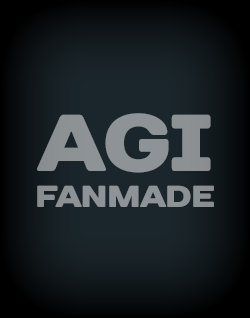
<style>
.page{position:relative;width:250px;height:318px}
.page>*{position:absolute;margin:0}
.t1{font:30.5px "DaysSansBlack";letter-spacing:-0.03em;color:#8d9395}
.t2{font:80.2px "DaysSansBlack";letter-spacing:-0.03em;color:#8d9395}
</style>
<div class="page">
<p class="t1" style="left:37px;top:113px;width:177px;height:94px;text-align:center"><span class="t2">AGI<br></span>FANMADE</p>
</div>
